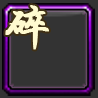
<style>
.page{position:relative;width:98px;height:98px;background:#333333}
.page>*{position:absolute;margin:0}
.t1{font:48px "STXingkai";letter-spacing:-0.05em;color:#fffbd0;font-weight:bold}
</style>
<div class="page">
<p class="t1" style="left:5px;top:5px;width:44px;height:45px">碎</p>
</div>
